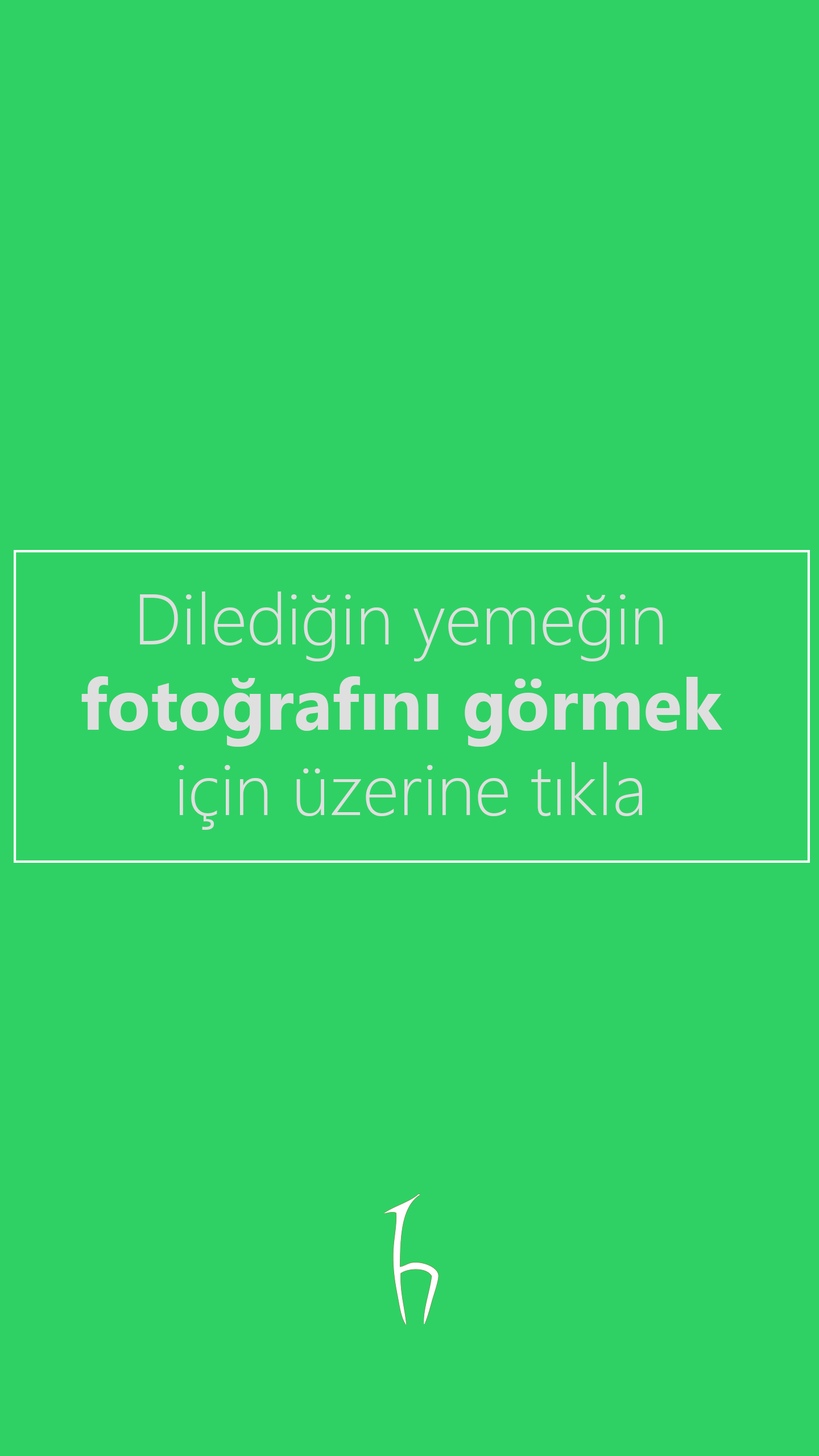
<style>
.page{position:relative;width:819px;height:1456px;background:#2fd164}
.page>*{position:absolute;margin:0}
.t1{font:71.1px "SegoeUI-Bold";color:#dfdfdf}
.t2{font:71.1px "SegoeUI-Light";color:#dfdfdf}
</style>
<div class="page">
<p class="t1" style="left:81px;top:591px;width:641px;height:239px;text-align:center"><span class="t2">Dilediğin yemeğin <br></span>fotoğrafını görmek <br><span class="t2">için üzerine tıkla</span></p>
</div>
